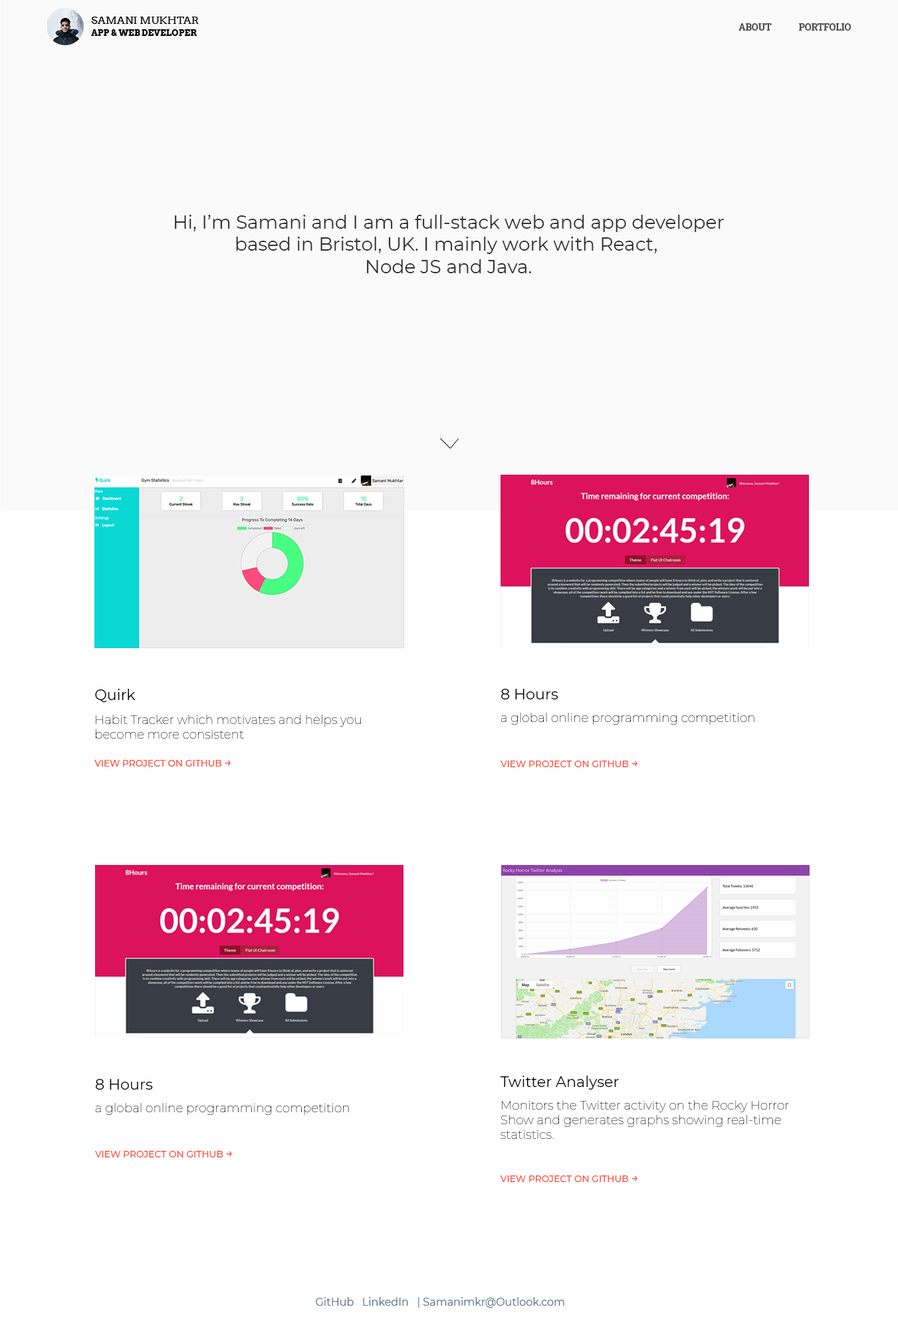
<style>
.page{position:relative;width:898px;height:1327px;background:#ffffff}
.page>*{position:absolute;margin:0}
.t1{font:10.6px "Arvo";color:#000000}
.t2{font:8.6px "Arvo-Bold";color:#000000}
.t3{font:9.3px "RobotoSlab-Bold";color:#4a4a4a}
.t4{font:18.6px "Montserrat-Regular";color:#313131}
.t5{font:14.7px "Montserrat-Regular";color:#000000}
.t6{font:14.8px "Montserrat-Regular";color:#000000}
.t7{font:12.3px "Montserrat-Thin";color:#000000}
.t8{font:9.1px "Montserrat-Medium";color:#ff503f}
.t9{font:12.3px "Montserrat-Medium";color:#ff503f}
.t10{font:10.6px "Montserrat-Regular";color:#566e89}
</style>
<div class="page">
<p class="t1" style="left:91px;top:17px;width:108px;height:7px">SAMANI MUKHTAR</p>
<p class="t2" style="left:91px;top:29px;width:106px;height:8px">APP &amp; WEB DEVELOPER</p>
<p class="t3" style="left:739px;top:23px;width:33px;height:8px">ABOUT</p>
<p class="t3" style="left:799px;top:23px;width:53px;height:8px">PORTFOLIO</p>
<p class="t4" style="left:175px;top:215px;width:549px;height:58px;text-align:center">Hi, I’m Samani and I am a full-stack web and app developer<br>based in Bristol, UK. I mainly work with React, <br>Node JS and Java.</p>
<p class="t5" style="left:95px;top:689px;width:41px;height:14px">Quirk</p>
<p class="t6" style="left:501px;top:689px;width:58px;height:11px">8 Hours</p>
<p class="t7" style="left:501px;top:713px;width:254px;height:12px">a global online programming competition</p>
<p class="t7" style="left:96px;top:715px;width:265px;height:24px">Habit Tracker which motivates and helps you<br>become more consistent</p>
<p class="t8" style="left:94px;top:760px;width:137px;height:7px">VIEW PROJECT ON GITHUB <span class="t9">→</span></p>
<p class="t8" style="left:501px;top:761px;width:137px;height:6px">VIEW PROJECT ON GITHUB <span class="t9">→</span></p>
<p class="t6" style="left:96px;top:1079px;width:57px;height:11px">8 Hours</p>
<p class="t6" style="left:500px;top:1076px;width:119px;height:14px">Twitter Analyser</p>
<p class="t7" style="left:95px;top:1103px;width:254px;height:12px">a global online programming competition</p>
<p class="t7" style="left:501px;top:1101px;width:288px;height:38px">Monitors the Twitter activity on the Rocky Horror<br>Show and generates graphs showing real-time<br>statistics.</p>
<p class="t8" style="left:95px;top:1151px;width:137px;height:7px">VIEW PROJECT ON GITHUB <span class="t9">→</span></p>
<p class="t8" style="left:500px;top:1176px;width:138px;height:6px">VIEW PROJECT ON GITHUB <span class="t9">→</span></p>
<p class="t10" style="left:316px;top:1297px;width:249px;height:11px">GitHub   LinkedIn   | Samanimkr@Outlook.com</p>
</div>
